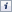
<style>
.page{position:relative;width:12px;height:12px;background:#e4e4f0}
.page>*{position:absolute;margin:0}
.t1{font:8px "LucidaSans-TypewriterBoldOblique";letter-spacing:-0.075em;color:#233762}
</style>
<div class="page">
<p class="t1" style="left:4px;top:2px;width:4px;height:7px">i</p>
</div>
